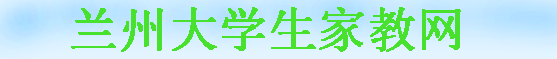
<style>
.page{position:relative;width:557px;height:59px}
.page>*{position:absolute;margin:0}
.t1{font:48px "SimSun";letter-spacing:0.005em;color:#47e12e;font-weight:bold}
</style>
<div class="page">
<p class="t1" style="left:71px;top:7px;width:390px;height:45px">兰州大学生家教网</p>
</div>
